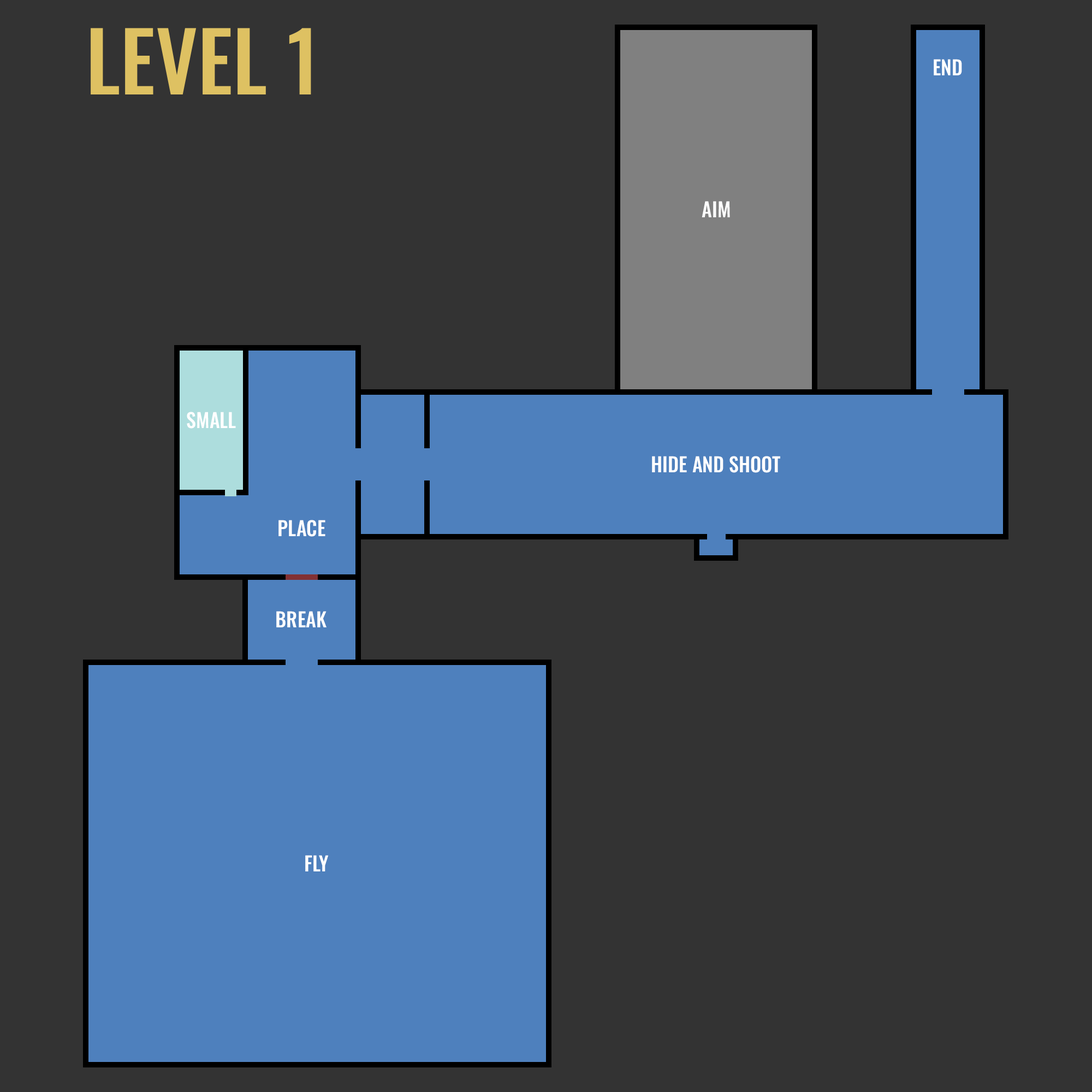
<style>
.page{position:relative;width:1092px;height:1092px;background:#333333}
.page>*{position:absolute;margin:0}
.t1{font:81.9px "Oswald-Medium";color:#dec162}
.t2{font:19.7px "Oswald-Medium";color:#ffffff}
</style>
<div class="page">
<p class="t1" style="left:91px;top:28px;width:220px;height:66px">LEVEL 1</p>
<p class="t2" style="left:934px;top:59px;width:28px;height:16px">END</p>
<p class="t2" style="left:702px;top:201px;width:28px;height:16px">AIM</p>
<p class="t2" style="left:187px;top:412px;width:49px;height:17px">SMALL</p>
<p class="t2" style="left:652px;top:456px;width:128px;height:17px">HIDE AND SHOOT</p>
<p class="t2" style="left:278px;top:520px;width:47px;height:17px">PLACE</p>
<p class="t2" style="left:276px;top:611px;width:51px;height:16px">BREAK</p>
<p class="t2" style="left:305px;top:855px;width:24px;height:16px">FLY</p>
</div>
